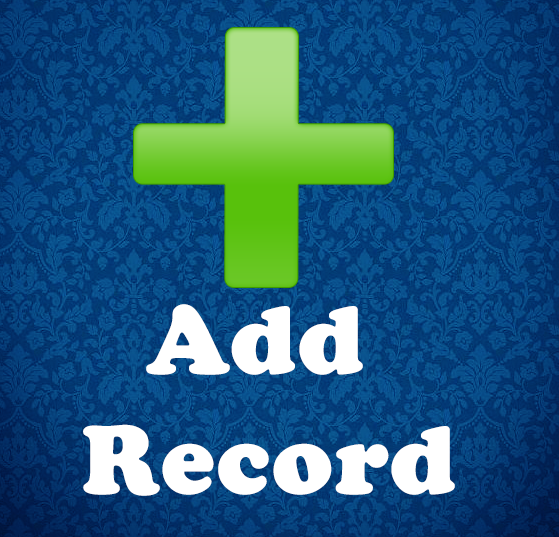
<style>
.page{position:relative;width:559px;height:537px}
.page>*{position:absolute;margin:0}
.t1{font:100px "CooperBlack";color:#ffffff;font-weight:bold}
</style>
<div class="page">
<p class="t1" style="left:83px;top:304px;width:372px;height:192px;text-align:center">Add<br> Record</p>
</div>
